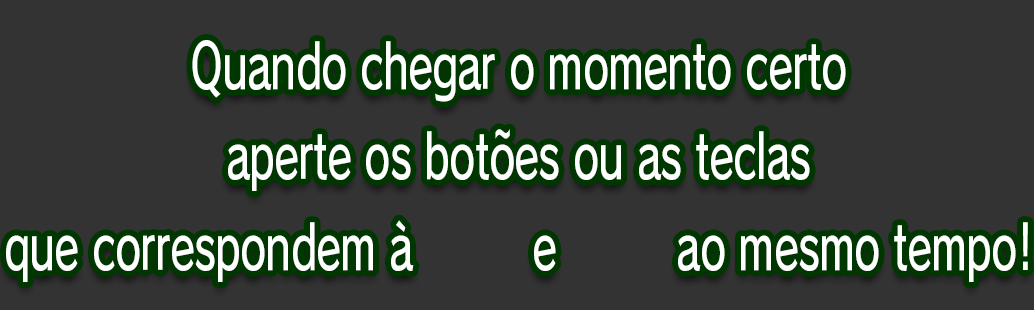
<style>
.page{position:relative;width:1034px;height:310px;background:#333333}
.page>*{position:absolute;margin:0}
.t1{font:61.3px/90.7px "RodinPro-DB";letter-spacing:-0.022em;color:#ffffff;scale:0.67 1}
</style>
<div class="page">
<p class="t1" style="left:6px;top:40px;width:1022px;height:242px;text-align:center">Quando chegar o momento certo<br>aperte os botões ou as teclas<br>que correspondem à         e         ao mesmo tempo!</p>
</div>
